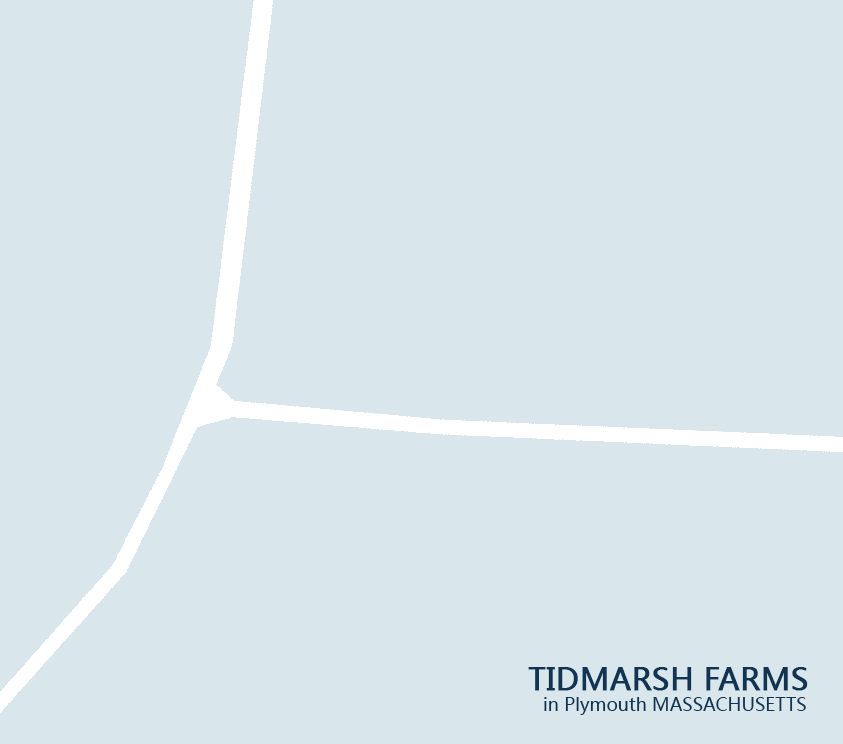
<style>
.page{position:relative;width:843px;height:744px;background:#d9e6ec}
.page>*{position:absolute;margin:0}
.t1{font:30px "MicrosoftYaHei";color:#103452;font-weight:bold}
.t2{font:18px "MicrosoftYaHei";color:#103452}
</style>
<div class="page">
<p class="t1" style="left:528px;top:667px;width:280px;height:24px">TIDMARSH FARMS</p>
<p class="t2" style="left:544px;top:697px;width:262px;height:18px">in Plymouth MASSACHUSETTS</p>
</div>
